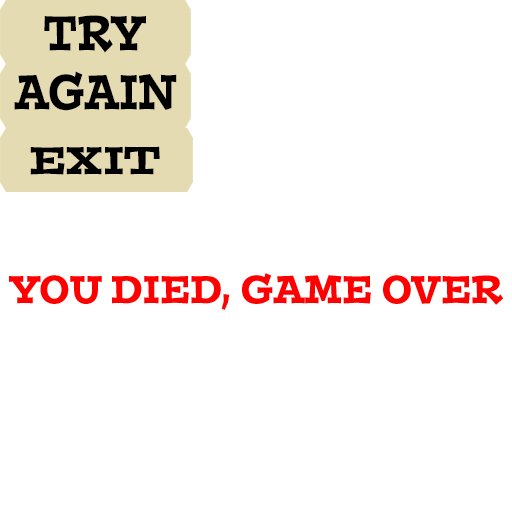
<style>
.page{position:relative;width:512px;height:512px;background:#ffffff}
.page>*{position:absolute;margin:0}
.t1{font:48.7px "PostinoStd";color:#000000;scale:0.7 1}
.t2{font:38.8px "PostinoStd";color:#000000}
.t3{font:38.8px "PostinoStd";color:#ff0000;scale:0.78 1}
</style>
<div class="page">
<p class="t1" style="left:14px;top:15px;width:163px;height:96px;text-align:center">TRY<br>AGAIN</p>
<p class="t2" style="left:30px;top:146px;width:130px;height:29px">EXIT</p>
<p class="t3" style="left:9px;top:273px;width:495px;height:37px">YOU DIED, GAME OVER</p>
</div>
